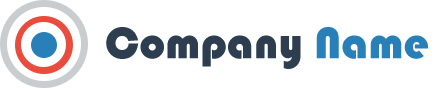
<style>
.page{position:relative;width:440px;height:88px;background:#ffffff}
.page>*{position:absolute;margin:0}
.t1{font:45.7px "Bauhaus93";color:#2c3e50}
.t2{font:45.7px "Bauhaus93";color:#2980b9}
</style>
<div class="page">
<p class="t1" style="left:106px;top:27px;width:322px;height:42px">Company <span class="t2">Name</span></p>
</div>
